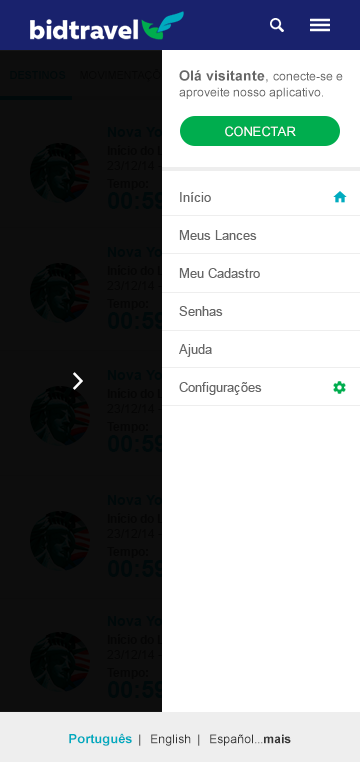
<style>
.page{position:relative;width:360px;height:762px;background:#ffffff}
.page>*{position:absolute;margin:0}
.t1{font:11px "Arial-BoldMT";color:#00090a;text-transform:uppercase}
.t2{font:12px/16px "ArialMT";color:#666666}
.t3{font:14px/16px "Arial-BoldMT";color:#666666}
.t4{font:14px/16px "ArialMT";color:#666666}
.t5{font:13px "ArialMT";color:#ffffff;text-transform:uppercase}
.t6{font:13px/38px "ArialMT";color:#666666}
.t7{font:12px "ArialMT";color:#333333}
.t8{font:13px "Arial-BoldMT";color:#00abbf}
.t9{font:12px "Arial-BoldMT";color:#333333}
</style>
<div class="page">
<p class="t1" style="left:10px;top:71px;width:56px;height:8px">Destinos</p>
<p class="t2" style="left:179px;top:70px;width:164px;height:29px"><span class="t3">Olá visitante</span><span class="t4">, </span>conecte-se e <br>aproveite nosso aplicativo.</p>
<p class="t5" style="left:225px;top:126px;width:71px;height:11px">Conectar</p>
<p class="t6" style="left:179px;top:192px;width:83px;height:203px">Início<br>Meus Lances<br>Meu Cadastro<br>Senhas<br>Ajuda<br>Configurações</p>
<p class="t7" style="left:69px;top:733px;width:222px;height:13px"><span class="t8">Português</span>  |   English  |   Español...<span class="t9">mais</span></p>
</div>
